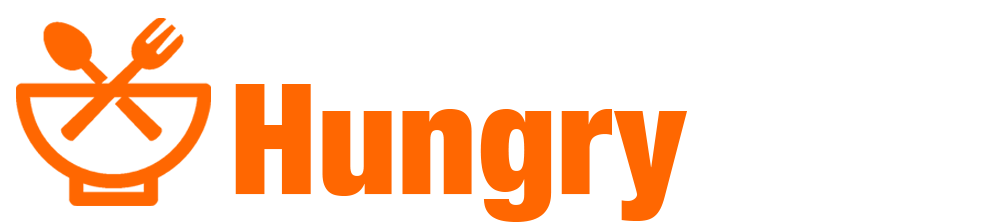
<style>
.page{position:relative;width:991px;height:222px;background:#ffffff}
.page>*{position:absolute;margin:0}
.t1{font:154px "HelveticaNeue-CondensedBlack";color:#ff6701}
.t2{font:154px "HelveticaNeue-CondensedBlack";color:#ffffff}
</style>
<div class="page">
<p class="t1" style="left:235px;top:84px;width:754px;height:138px">Hungry<span class="t2">Zone</span></p>
</div>
